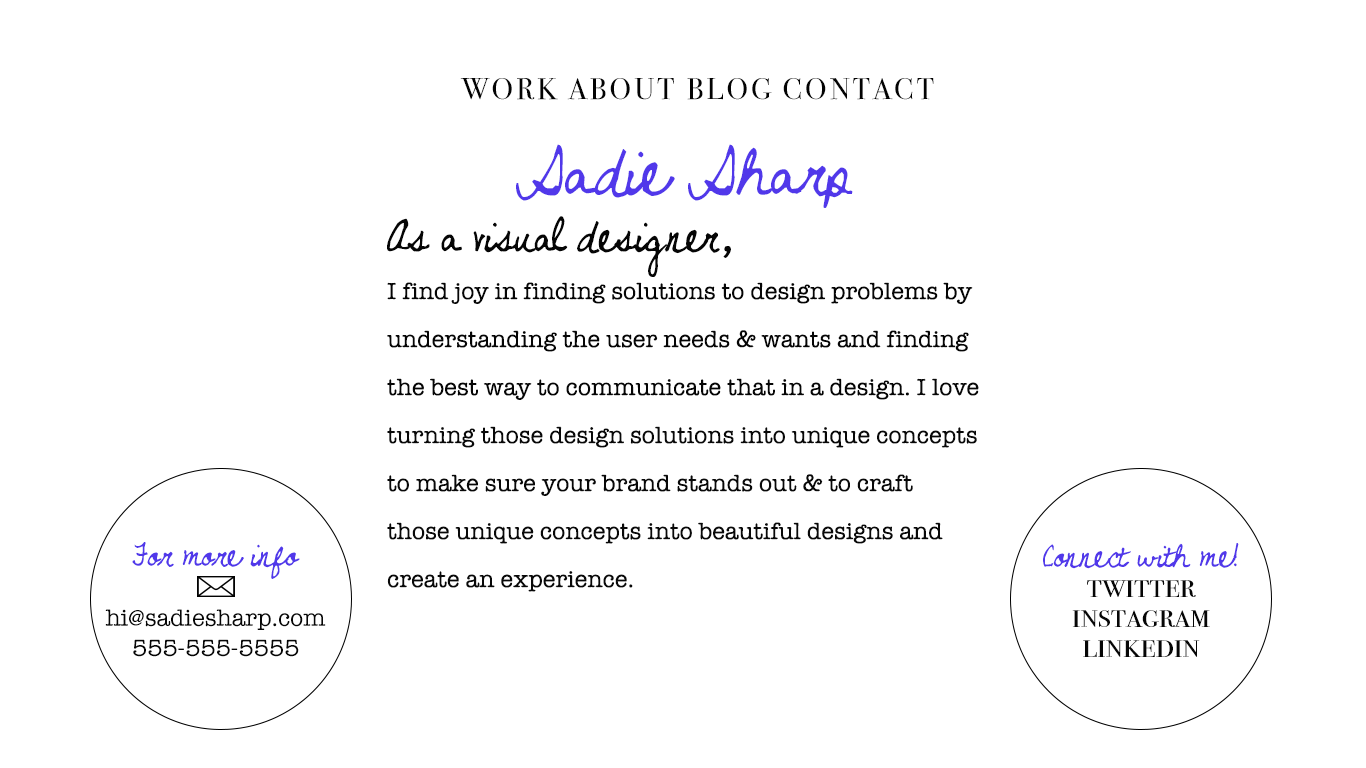
<style>
.page{position:relative;width:1366px;height:768px;background:#ffffff}
.page>*{position:absolute;margin:0}
.t1{font:30px "BodoniSvtyTwoSCITCTT-Book";letter-spacing:0.1em;color:#030303}
.t2{font:72px "NeverLetGo";color:#5138ea}
.t3{font:72px "NeverLetGo";color:#5138ea;text-transform:uppercase}
.t4{font:24px/48px "AmericanTypewriter";color:#080808}
.t5{font:48px/48px "NeverLetGo";color:#050505}
.t6{font:48px/48px "Kefa-Regular";color:#050505}
.t7{font:24px/48px "AmericanTypewriter";color:#050505}
.t8{font:24px/30px "AmericanTypewriter";color:#060606}
.t9{font:36px/30px "NeverLetGo";color:#5138ea}
.t10{font:36px/30px "BodoniSvtyTwoSCITCTT-Book";color:#060606}
</style>
<div class="page">
<p class="t1" style="left:460px;top:78px;width:474px;height:22px">WORK ABOUT BLOG CONTACT</p>
<p class="t2" style="left:516px;top:144px;width:337px;height:64px"><span class="t3">S</span>adie Sharp</p>
<p class="t4" style="left:387px;top:216px;width:592px;height:376px"><span class="t5">As a visual designer</span><span class="t6">, <br></span><span class="t7">I find joy in finding solutions to design problems by understanding the user needs &amp; wants and finding the best way to communicate that in a design. </span>I love turning those design solutions into unique concepts to make sure your brand stands out &amp; to craft those unique concepts into beautiful designs and create an experience.</p>
<p class="t8" style="left:105px;top:542px;width:221px;height:115px;text-align:center"><span class="t9">For more info<br><br></span>hi@sadiesharp.com   <br>555-555-5555</p>
<p class="t10" style="left:1043px;top:543px;width:196px;height:114px;text-align:center"><span class="t9">Connect with me!<br></span>twitter<br>instagram<br>linkedin</p>
</div>
